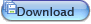
<style>
.page{position:relative;width:91px;height:24px}
.page>*{position:absolute;margin:0}
.t1{font:12px "LucidaSansUnicode";color:#24303d}
</style>
<div class="page">
<p class="t1" style="left:17px;top:7px;width:57px;height:9px">Download</p>
</div>
